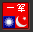
<style>
.page{position:relative;width:33px;height:32px;background:#f20000}
.page>*{position:absolute;margin:0}
.t1{font:10.4px "SimSun";color:#ffffff}
</style>
<div class="page">
<p class="t1" style="left:7px;top:4px;width:18px;height:8px">一军</p>
</div>
